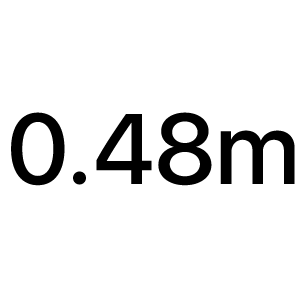
<style>
.page{position:relative;width:300px;height:300px;background:#ffffff}
.page>*{position:absolute;margin:0}
.t1{font:99px "SFUIDisplay-Medium";color:#000000}
</style>
<div class="page">
<p class="t1" style="left:11px;top:112px;width:284px;height:74px">0.48m</p>
</div>
